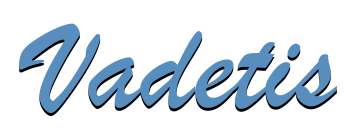
<style>
.page{position:relative;width:360px;height:140px;background:#ffffff}
.page>*{position:absolute;margin:0}
.t1{font:130px "BrushScriptMT";color:#578ebe}
</style>
<div class="page">
<p class="t1" style="left:19px;top:23px;width:318px;height:91px">Vadetis</p>
</div>
